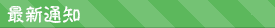
<style>
.page{position:relative;width:275px;height:28px;background:#74c274}
.page>*{position:absolute;margin:0}
.t1{font:18.7px "HanWang-GuInMedium-Gb5";color:#ffffff}
</style>
<div class="page">
<p class="t1" style="left:7px;top:6px;width:73px;height:17px">最新通知</p>
</div>
